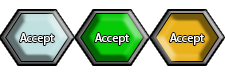
<style>
.page{position:relative;width:225px;height:75px;background:#ffffff}
.page>*{position:absolute;margin:0}
.t1{font:12px "MyriadPro-Regular";color:#fffefe}
</style>
<div class="page">
<p class="t1" style="left:20px;top:33px;width:34px;height:12px">Accept</p>
<p class="t1" style="left:20px;top:33px;width:34px;height:12px">Accept</p>
<p class="t1" style="left:95px;top:33px;width:34px;height:12px">Accept</p>
<p class="t1" style="left:95px;top:33px;width:34px;height:12px">Accept</p>
<p class="t1" style="left:170px;top:33px;width:34px;height:12px">Accept</p>
<p class="t1" style="left:170px;top:33px;width:34px;height:12px">Accept</p>
</div>
